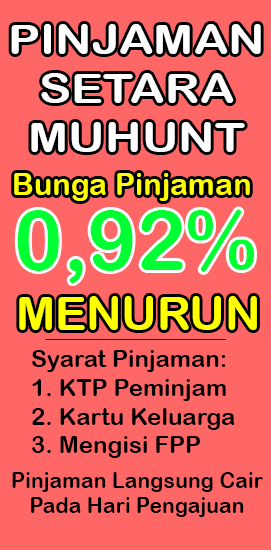
<style>
.page{position:relative;width:271px;height:550px;background:#ff6666}
.page>*{position:absolute;margin:0}
.t1{font:41.2px "ArialRoundedMTBold";color:#ffffff;scale:1.17 1}
.t2{font:30.7px "ArialRoundedMTBold";color:#ffff00}
.t3{font:82.8px "ArialRoundedMTBold";color:#00ff33}
.t4{font:46.5px "ArialRoundedMTBold";color:#ffff00}
.t5{font:24px "ArialRoundedMTBold";color:#000000}
.t6{font:21.5px "ArialRoundedMTBold";color:#000000}
</style>
<div class="page">
<p class="t1" style="left:11px;top:24px;width:250px;height:128px;text-align:center">PINJAMAN<br>SETARA<br>MUHUNT</p>
<p class="t2" style="left:14px;top:173px;width:236px;height:28px">Bunga Pinjaman</p>
<p class="t3" style="left:17px;top:209px;width:238px;height:74px">0,92%</p>
<p class="t4" style="left:19px;top:296px;width:238px;height:34px">MENURUN</p>
<p class="t5" style="left:45px;top:339px;width:181px;height:1px">____________________</p>
<p class="t5" style="left:32px;top:350px;width:203px;height:108px">Syarat Pinjaman:<br>1. KTP Peminjam<br>2. Kartu Keluarga<br>3. Mengisi FPP</p>
<p class="t6" style="left:12px;top:472px;width:251px;height:45px;text-align:center">Pinjaman Langsung Cair<br>Pada Hari Pengajuan</p>
</div>
